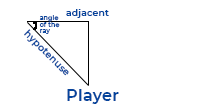
<style>
.page{position:relative;width:200px;height:104px;background:#ffffff}
.page>*{position:absolute;margin:0}
.t1{font:6.3px/6.3px "Montserrat-SemiBold";letter-spacing:0.02em;color:#05449c}
.t2{font:9.2px "Montserrat-SemiBold";letter-spacing:0.02em;color:#05449c}
.t3{font:9.6px "Montserrat-SemiBold";letter-spacing:0.02em;color:#05449c}
.t4{font:16px "Montserrat-SemiBold";letter-spacing:0.02em;color:#05449c}
</style>
<div class="page">
<p class="t1" style="left:39px;top:15px;width:21px;height:19px">angle<br>of the<br>ray</p>
<p class="t2" style="left:66px;top:9px;width:43px;height:9px">adjacent</p>
<p class="t3" style="left:24px;top:29px;width:45px;height:47px;rotate:45deg">hypotenuse</p>
<p class="t4" style="left:67px;top:89px;width:52px;height:15px">Player</p>
</div>
